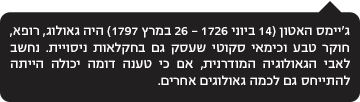
<style>
.page{position:relative;width:360px;height:102px;background:#211f20}
.page>*{position:absolute;margin:0}
.t1{font:14px "NarkisBlockMF-Regular";color:#ffffff}
</style>
<div class="page">
<p class="t1" style="left:10px;top:25px;width:340px;height:60px;text-align:justify">ג'יימס האטון (14 ביוני 1726 – 26 במרץ 1797) היה גאולוג, רופא, חוקר טבע וכימאי סקוטי שעסק גם בחקלאות ניסויית. נחשב לאבי הגאולוגיה המודרנית, אם כי טענה דומה יכולה הייתה להתייחס גם לכמה גאולוגים אחרים.</p>
</div>
